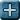
<style>
.page{position:relative;width:20px;height:20px}
.page>*{position:absolute;margin:0}
.t1{font:22px "HoboStd";color:#b4ccd8;scale:1.1 1}
</style>
<div class="page">
<p class="t1" style="left:4px;top:4px;width:12px;height:13px">+</p>
</div>
